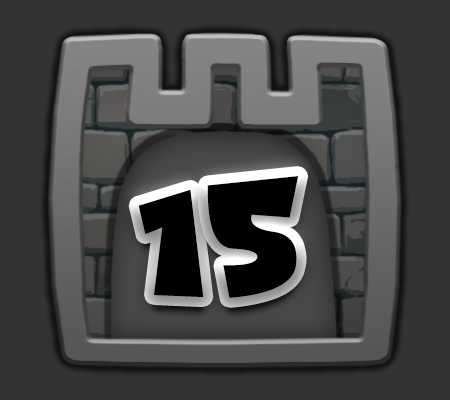
<style>
.page{position:relative;width:450px;height:400px;background:#333333}
.page>*{position:absolute;margin:0}
.t1{font:146.8px "Funhouse";color:#000000}
</style>
<div class="page">
<p class="t1" style="left:207px;top:176px;width:92px;height:122px">5</p>
<p class="t1" style="left:138px;top:189px;width:66px;height:108px">1</p>
</div>
